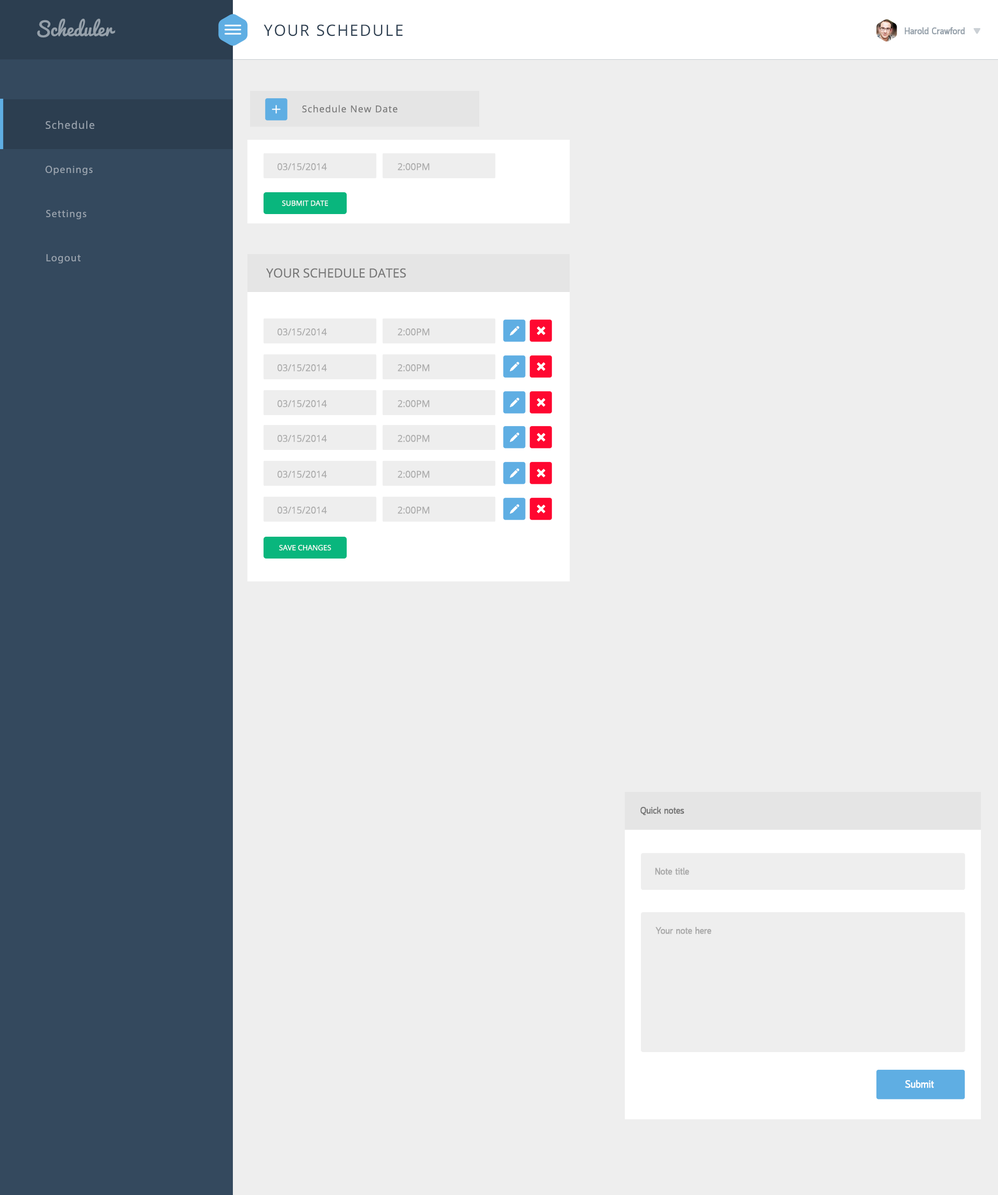
<style>
.page{position:relative;width:998px;height:1195px;background:#eeeeee}
.page>*{position:absolute;margin:0}
.t1{font:18.7px "Pacifico-Regular";color:#95a0aa}
.t2{font:15.6px "OpenSans";letter-spacing:0.08em;color:#2c3e50}
.t3{font:9.4px "Quark-Bold";color:#95a0aa}
.t4{font:9.4px "OpenSans";letter-spacing:0.075em;color:#777777}
.t5{font:10.4px "OpenSans";letter-spacing:0.075em;color:#98a2ad}
.t6{font:10.4px "MyriadPro-Regular";letter-spacing:0.075em;color:#98a2ad}
.t7{font:9.4px "OpenSans";color:#aaaaaa}
.t8{font:7.3px "OpenSans";color:#ffffff}
.t9{font:12.5px "OpenSans";color:#777777}
.t10{font:9.4px "SSStandard";color:#ffffff}
.t11{font:9.4px "Quark-Bold";color:#777777}
.t12{font:9.4px "Quark-Bold";color:#aaaaaa}
.t13{font:10.4px "Quark-Bold";color:#ffffff}
</style>
<div class="page">
<p class="t1" style="left:37px;top:19px;width:78px;height:19px">Scheduler</p>
<p class="t2" style="left:263px;top:24px;width:140px;height:12px">YOUR SCHEDULE</p>
<p class="t3" style="left:904px;top:27px;width:60px;height:7px">Harold Crawford</p>
<p class="t4" style="left:302px;top:105px;width:96px;height:8px">Schedule New Date</p>
<p class="t5" style="left:46px;top:121px;width:49px;height:8px">Schedule</p>
<p class="t6" style="left:45px;top:166px;width:47px;height:9px">Openings</p>
<p class="t7" style="left:277px;top:163px;width:50px;height:7px">03/15/2014</p>
<p class="t7" style="left:398px;top:163px;width:31px;height:7px">2:00PM</p>
<p class="t6" style="left:46px;top:210px;width:40px;height:9px">Settings</p>
<p class="t8" style="left:282px;top:200px;width:46px;height:6px">SUBMIT DATE</p>
<p class="t6" style="left:46px;top:254px;width:35px;height:9px">Logout</p>
<p class="t9" style="left:266px;top:268px;width:140px;height:10px">YOUR SCHEDULE DATES</p>
<p class="t7" style="left:277px;top:328px;width:50px;height:8px">03/15/2014</p>
<p class="t7" style="left:398px;top:328px;width:31px;height:8px">2:00PM</p>
<p class="t10" style="left:510px;top:326px;width:9px;height:10px">Edit</p>
<p class="t10" style="left:537px;top:326px;width:8px;height:9px">delete</p>
<p class="t7" style="left:277px;top:364px;width:50px;height:8px">03/15/2014</p>
<p class="t7" style="left:398px;top:364px;width:31px;height:8px">2:00PM</p>
<p class="t10" style="left:510px;top:362px;width:9px;height:10px">Edit</p>
<p class="t10" style="left:537px;top:362px;width:8px;height:9px">delete</p>
<p class="t7" style="left:277px;top:400px;width:50px;height:7px">03/15/2014</p>
<p class="t7" style="left:398px;top:400px;width:31px;height:7px">2:00PM</p>
<p class="t10" style="left:510px;top:398px;width:9px;height:9px">Edit</p>
<p class="t10" style="left:537px;top:398px;width:8px;height:9px">delete</p>
<p class="t7" style="left:277px;top:435px;width:50px;height:7px">03/15/2014</p>
<p class="t7" style="left:398px;top:435px;width:31px;height:7px">2:00PM</p>
<p class="t10" style="left:510px;top:432px;width:9px;height:10px">Edit</p>
<p class="t10" style="left:537px;top:433px;width:8px;height:9px">delete</p>
<p class="t7" style="left:277px;top:471px;width:50px;height:7px">03/15/2014</p>
<p class="t7" style="left:398px;top:471px;width:31px;height:7px">2:00PM</p>
<p class="t10" style="left:510px;top:468px;width:9px;height:10px">Edit</p>
<p class="t10" style="left:537px;top:469px;width:8px;height:9px">delete</p>
<p class="t7" style="left:277px;top:507px;width:50px;height:7px">03/15/2014</p>
<p class="t7" style="left:398px;top:507px;width:31px;height:7px">2:00PM</p>
<p class="t10" style="left:510px;top:504px;width:9px;height:10px">Edit</p>
<p class="t10" style="left:537px;top:505px;width:8px;height:8px">delete</p>
<p class="t8" style="left:279px;top:545px;width:52px;height:6px">SAVE CHANGES</p>
<p class="t11" style="left:640px;top:806px;width:44px;height:9px">Quick notes</p>
<p class="t12" style="left:655px;top:868px;width:34px;height:7px">Note title</p>
<p class="t12" style="left:655px;top:927px;width:56px;height:7px">Your note here</p>
<p class="t13" style="left:905px;top:1080px;width:29px;height:8px">Submit</p>
</div>
